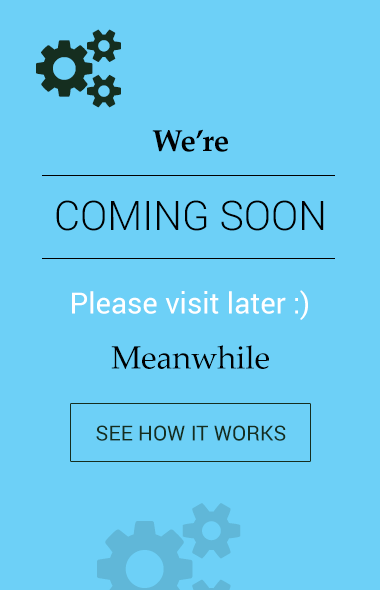
<style>
.page{position:relative;width:380px;height:590px;background:#6dd0f7}
.page>*{position:absolute;margin:0}
.t1{font:30.2px "PalatinoLinotype-Bold";color:#000000}
.t2{font:40.8px "Roboto-Light";color:#000000}
.t3{font:29.2px "Roboto-Regular";color:#ffffff}
.t4{font:32.2px "PalatinoLinotype-Roman";color:#000000}
.t5{font:20.8px "Roboto-Regular";color:#152e1f}
</style>
<div class="page">
<p class="t1" style="left:152px;top:129px;width:76px;height:23px">We’re</p>
<p class="t2" style="left:56px;top:200px;width:268px;height:31px">COMING SOON</p>
<p class="t3" style="left:72px;top:290px;width:236px;height:30px">Please visit later :)</p>
<p class="t4" style="left:111px;top:345px;width:158px;height:24px">Meanwhile</p>
<p class="t5" style="left:96px;top:425px;width:190px;height:16px">SEE HOW IT WORKS</p>
</div>
